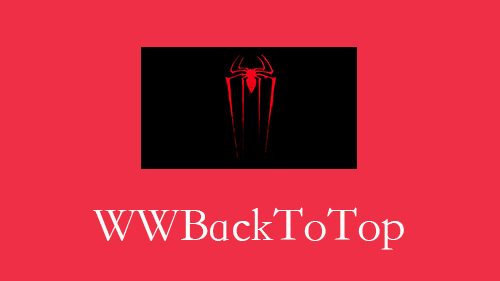
<style>
.page{position:relative;width:500px;height:281px;background:#ef2f45}
.page>*{position:absolute;margin:0}
.t1{font:48px "STFangsong";color:#fdfcfc}
</style>
<div class="page">
<p class="t1" style="left:93px;top:207px;width:311px;height:43px">WWBackToTop</p>
</div>
